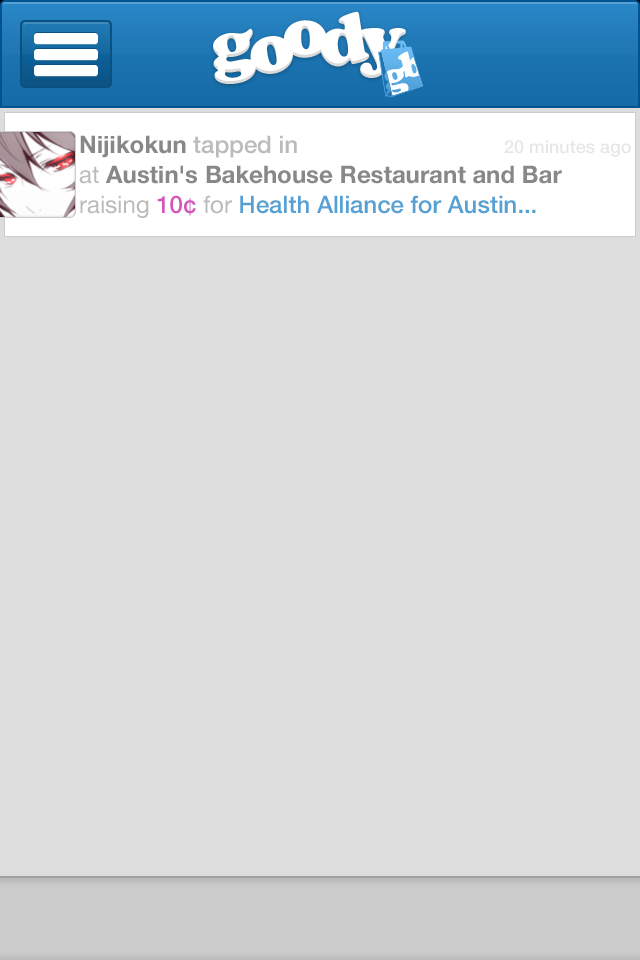
<style>
.page{position:relative;width:640px;height:960px;background:#dddddd}
.page>*{position:absolute;margin:0}
.t1{font:24px "HelveticaNeue-Bold";color:#888888}
.t2{font:24px "HelveticaNeue-Medium";color:#bbbbbb}
.t3{font:18px "HelveticaNeue-Medium";color:#e6e6e6}
.t4{font:24px "HelveticaNeue";color:#bbbbbb}
.t5{font:24px "HelveticaNeue-Medium";color:#57a0d3}
.t6{font:24px "HelveticaNeue-Medium";color:#d357ba}
</style>
<div class="page">
<p class="t1" style="left:80px;top:135px;width:217px;height:23px">Nijikokun <span class="t2">tapped in</span></p>
<p class="t3" style="left:504px;top:140px;width:127px;height:17px">20 minutes ago</p>
<p class="t1" style="left:79px;top:165px;width:483px;height:19px"><span class="t4">at </span>Austin's Bakehouse Restaurant and Bar</p>
<p class="t5" style="left:80px;top:195px;width:456px;height:23px"><span class="t4">raising </span><span class="t6">10¢ </span><span class="t4">for </span>Health Alliance for Austin...</p>
</div>
